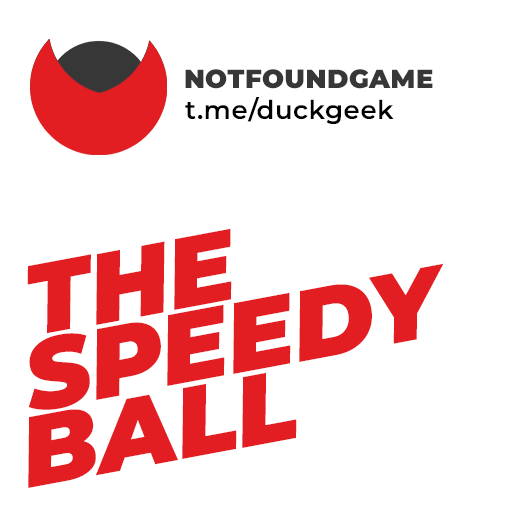
<style>
.page{position:relative;width:512px;height:512px;background:#ffffff}
.page>*{position:absolute;margin:0}
.t1{font:25.9px "Montserrat-Black";letter-spacing:0.02em;color:#373737;text-transform:uppercase}
.t2{font:25.9px "Montserrat-SemiBold";letter-spacing:0.02em;color:#000000}
.t3{font:99.2px/74px "Montserrat-BlackItalic";color:#e21e23;text-transform:uppercase}
.t4{font:99.2px/74px "Montserrat-BlackItalic";letter-spacing:0.02em;color:#e21e23;text-transform:uppercase}
</style>
<div class="page">
<p class="t1" style="left:185px;top:69px;width:248px;height:20px">notfoundgame</p>
<p class="t2" style="left:185px;top:97px;width:209px;height:28px">t.me/duckgeek</p>
<p class="t3" style="left:27px;top:228px;width:417px;height:260px;rotate:-11deg"><span class="t4"> </span>the<br> speedy<br>ball</p>
</div>
